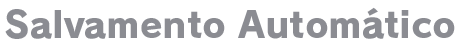
<style>
.page{position:relative;width:464px;height:48px;background:#ffffff}
.page>*{position:absolute;margin:0}
.t1{font:36px "RodinPro-EB";color:#8b8c92}
</style>
<div class="page">
<p class="t1" style="left:5px;top:7px;width:450px;height:32px">Salvamento Automático</p>
</div>
